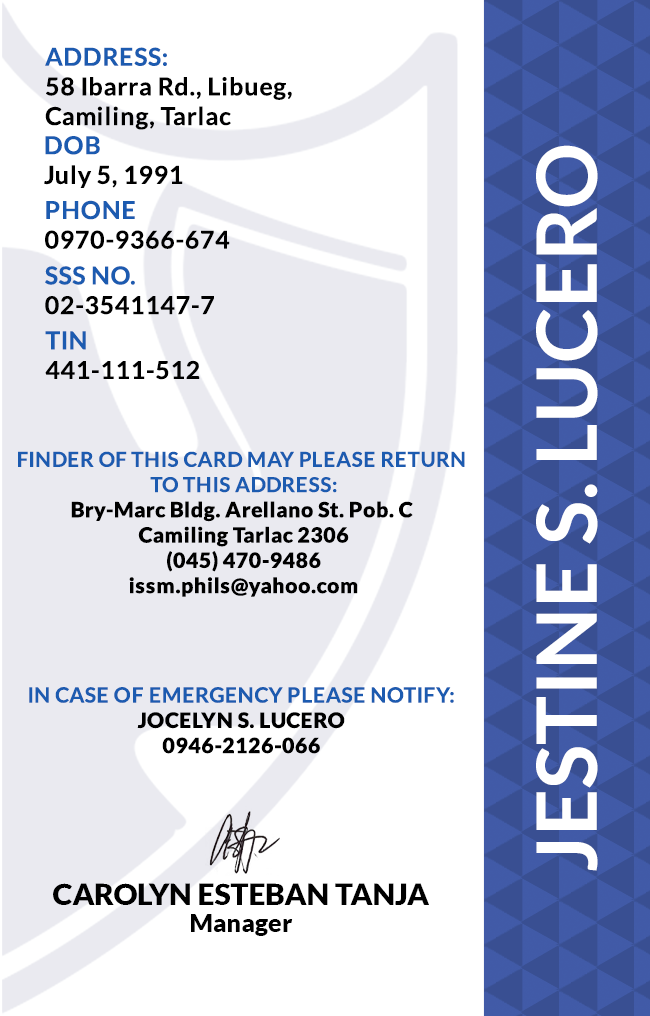
<style>
.page{position:relative;width:650px;height:1016px;background:#ffffff}
.page>*{position:absolute;margin:0}
.t1{font:24.7px/29.6px "Lato-Bold";letter-spacing:0.025em;color:#000000}
.t2{font:24.7px/29.6px "Lato-Bold";letter-spacing:0.025em;color:#1c5bb0}
.t3{font:24.7px/29.6px "Lato-Bold";letter-spacing:0.025em}
.t4{font:83.3px "Lato-Bold";color:#ffffff}
.t5{font:21.1px "Lato-Black";letter-spacing:0.025em}
.t6{font:20.5px/25.3px "Lato-Bold";letter-spacing:0.025em;text-transform:uppercase}
.t7{font:21.1px/25.3px "Lato-Bold";letter-spacing:0.025em}
.t8{font:29.5px "Lato-Black";color:#000000}
.t9{font:25px "Lato-Black";color:#000000}
</style>
<div class="page">
<p class="t1" style="left:45px;top:47px;width:247px;height:83px"><span class="t2">ADDRESS:<br></span>58 Ibarra Rd., Libueg, <br>Camiling, Tarlac</p>
<p class="t3" style="left:44px;top:136px;width:139px;height:52px">DOB<br>July 5, 1991</p>
<p class="t4" style="left:536px;top:145px;width:62px;height:726px;rotate:-90deg">JESTINE S. LUCERO</p>
<p class="t3" style="left:45px;top:200px;width:185px;height:49px">PHONE <br>0970-9366-674</p>
<p class="t3" style="left:45px;top:266px;width:169px;height:49px">SSS NO.<br>02-3541147-7</p>
<p class="t1" style="left:45px;top:331px;width:155px;height:49px">TIN<br>441-111-512</p>
<p class="t5" style="left:18px;top:451px;width:447px;height:146px;text-align:center"><span class="t6">Finder of this card may please return <br>to this address:<br></span>Bry-Marc Bldg. Arellano St. Pob. C <br>Camiling Tarlac 2306<br>(045) 470-9486<br>issm.phils@yahoo.com</p>
<p class="t7" style="left:29px;top:687px;width:425px;height:67px;text-align:center">IN CASE OF EMERGENCY PLEASE NOTIFY:<br><span class="t5">JOCELYN S. LUCERO<br>0946-2126-066</span></p>
<p class="t8" style="left:53px;top:883px;width:376px;height:22px">CAROLYN ESTEBAN TANJA</p>
<p class="t9" style="left:191px;top:914px;width:102px;height:22px">Manager</p>
</div>
